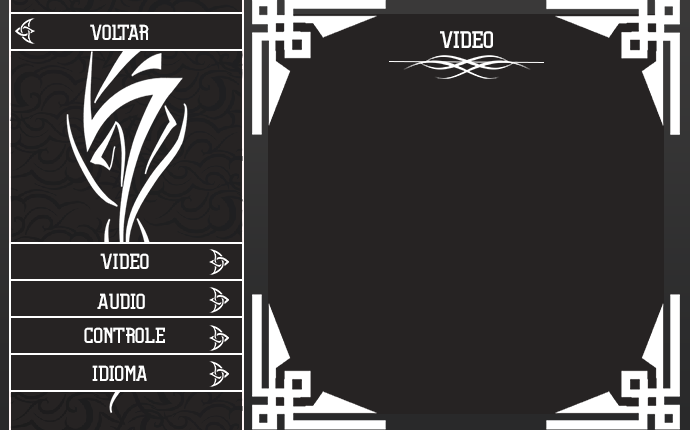
<style>
.page{position:relative;width:690px;height:430px;background:#262323}
.page>*{position:absolute;margin:0}
.t1{font:20px "Organic-Light";color:#ffffff}
.t2{font:22.2px "Organic-Light";color:#ffffff}
</style>
<div class="page">
<p class="t1" style="left:90px;top:24px;width:59px;height:16px">voltar</p>
<p class="t2" style="left:440px;top:31px;width:53px;height:17px">video</p>
<p class="t1" style="left:100px;top:253px;width:49px;height:16px">Video</p>
<p class="t1" style="left:97px;top:293px;width:48px;height:16px">audio</p>
<p class="t1" style="left:84px;top:327px;width:81px;height:16px">controle</p>
<p class="t1" style="left:92px;top:365px;width:55px;height:16px">idioma</p>
</div>
